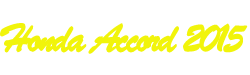
<style>
.page{position:relative;width:250px;height:75px;background:#ffffff}
.page>*{position:absolute;margin:0}
.t1{font:42px "BrushScriptMT";letter-spacing:-0.075em;color:#f1f40b;font-weight:bold}
</style>
<div class="page">
<p class="t1" style="left:0px;top:23px;width:248px;height:31px">Honda Accord 2015</p>
</div>
